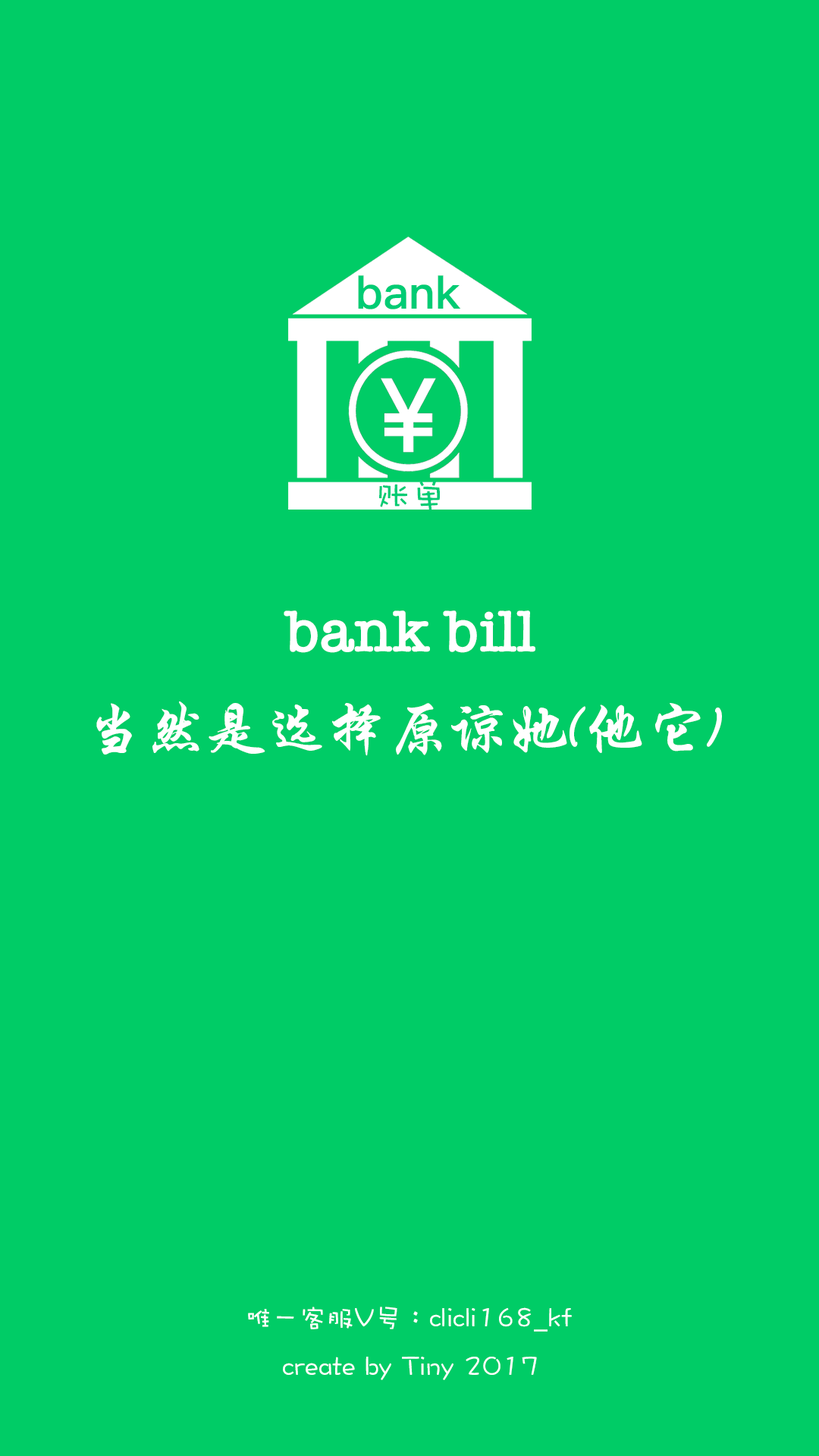
<style>
.page{position:relative;width:819px;height:1456px;background:#00cc66}
.page>*{position:absolute;margin:0}
.t1{font:45.5px "PingFangSC-Semibold";color:#00cc74}
.t2{font:36.4px "DFWaWaSC-W5";color:#00cc74}
.t3{font:60.7px "AmericanTypewriter-Semibold";color:#ffffff}
.t4{font:60.7px "STXingkaiTC-Bold";color:#ffffff}
.t5{font:27.3px "DFWaWaSC-W5";color:#ffffff}
</style>
<div class="page">
<p class="t1" style="left:358px;top:275px;width:103px;height:34px">bank</p>
<p class="t2" style="left:379px;top:480px;width:61px;height:30px">账单</p>
<p class="t3" style="left:284px;top:610px;width:251px;height:43px">bank bill</p>
<p class="t4" style="left:96px;top:701px;width:626px;height:55px">当然是选择原谅她(他它)</p>
<p class="t5" style="left:248px;top:1307px;width:324px;height:25px">唯一客服V号：clicli168_kf</p>
<p class="t5" style="left:283px;top:1357px;width:254px;height:23px">create by Tiny 2017</p>
</div>
